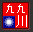
<style>
.page{position:relative;width:33px;height:32px;background:#f20000}
.page>*{position:absolute;margin:0}
.t1{font:10.4px "SimSun";color:#ffffff}
.t2{font:11.7px "SimSun";color:#ffffff}
</style>
<div class="page">
<p class="t1" style="left:6px;top:4px;width:19px;height:9px">九九</p>
<p class="t2" style="left:16px;top:15px;width:11px;height:12px">川</p>
</div>
